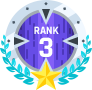
<style>
.page{position:relative;width:92px;height:90px;background:#ffffff}
.page>*{position:absolute;margin:0}
.t1{font:11px "Rajdhani-Bold";color:#ffffff}
.t2{font:30px "Rajdhani-Bold";color:#ffffff}
</style>
<div class="page">
<p class="t1" style="left:34px;top:26px;width:25px;height:8px">RANK</p>
<p class="t2" style="left:39px;top:37px;width:14px;height:20px">3</p>
</div>
